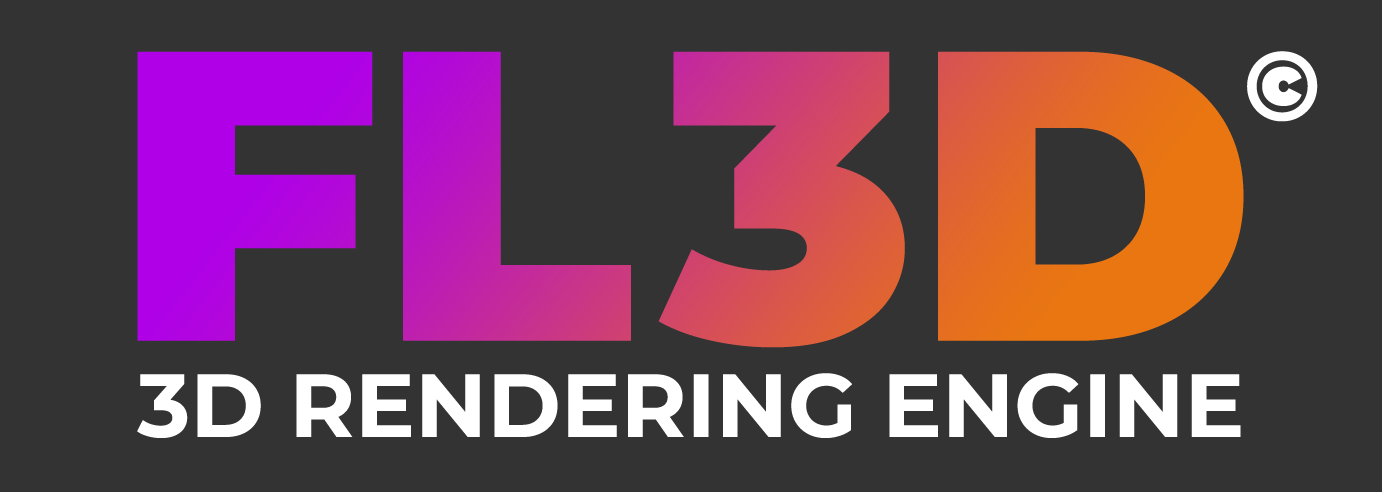
<style>
.page{position:relative;width:1382px;height:492px;background:#333333}
.page>*{position:absolute;margin:0}
.t1{font:98.9px "Montserrat-Black";color:#ffffff}
.t2{font:89.3px "Montserrat-Bold";color:#ffffff}
</style>
<div class="page">
<p class="t1" style="left:1247px;top:51px;width:71px;height:71px">©</p>
<p class="t2" style="left:137px;top:373px;width:1104px;height:65px">3D RENDERING ENGINE</p>
</div>
